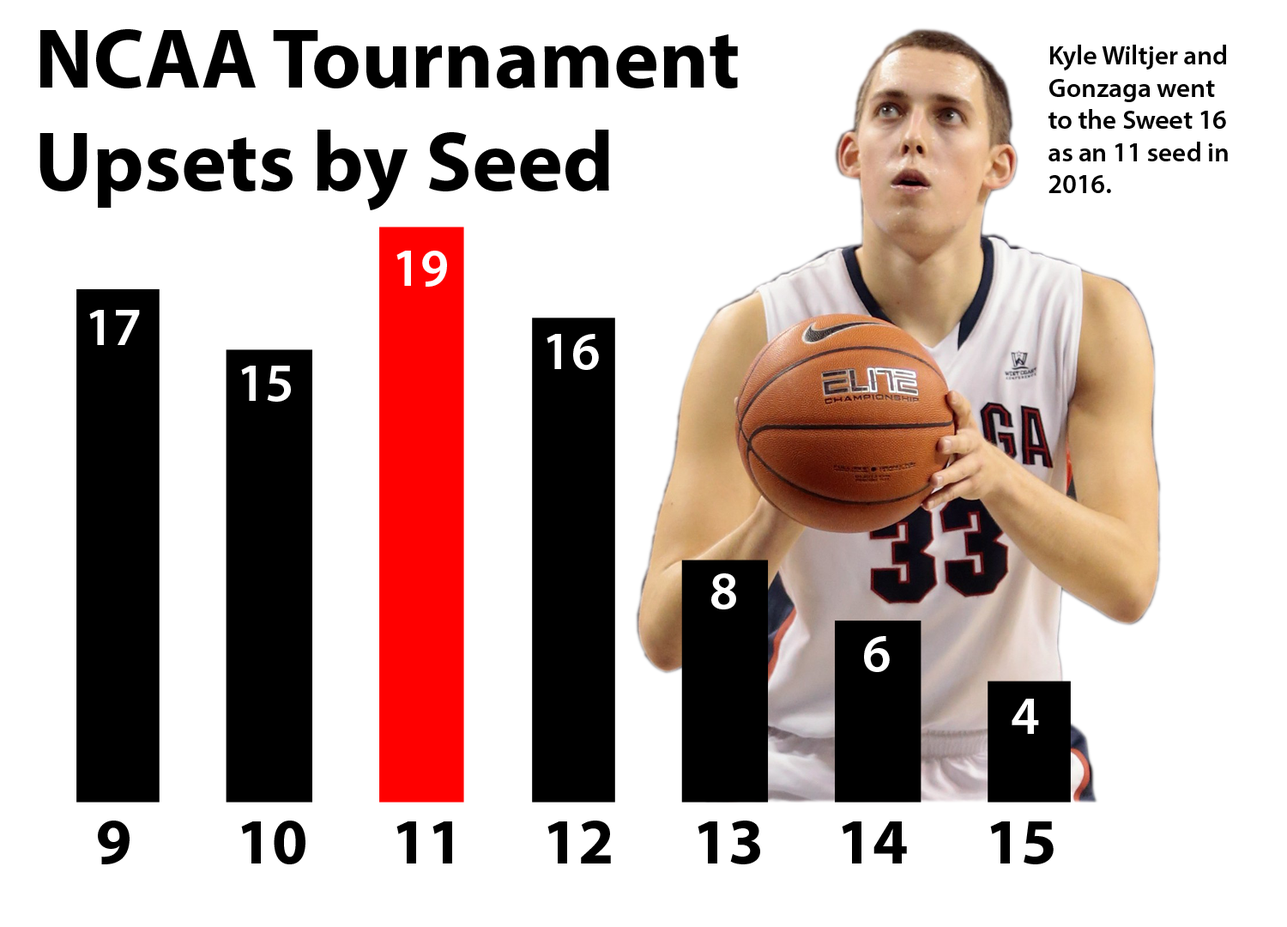
<style>
.page{position:relative;width:1287px;height:927px;background:#ffffff}
.page>*{position:absolute;margin:0}
.t1{font:85.8px "MyriadPro-Bold";color:#000000}
.t2{font:26.8px "MyriadPro-Semibold";color:#000000}
.t3{font:53.6px "MyriadPro-Semibold";color:#fefefe}
.t4{font:53.6px "MyriadPro-Semibold";color:#ffffff}
.t5{font:64.3px "MyriadPro-Bold";color:#000000}
</style>
<div class="page">
<p class="t1" style="left:39px;top:29px;width:699px;height:181px">NCAA Tournament<br>Upsets by Seed</p>
<p class="t2" style="left:1048px;top:45px;width:180px;height:148px">Kyle Wiltjer and Gonzaga went to the Sweet 16 as an 11 seed in 2016.</p>
<p class="t3" style="left:396px;top:251px;width:51px;height:36px">19</p>
<p class="t4" style="left:89px;top:310px;width:51px;height:35px">17</p>
<p class="t4" style="left:547px;top:334px;width:52px;height:36px">16</p>
<p class="t4" style="left:241px;top:365px;width:50px;height:37px">15</p>
<p class="t4" style="left:711px;top:573px;width:25px;height:36px">8</p>
<p class="t4" style="left:864px;top:636px;width:26px;height:36px">6</p>
<p class="t4" style="left:1012px;top:698px;width:27px;height:36px">4</p>
<p class="t5" style="left:98px;top:820px;width:32px;height:44px">9</p>
<p class="t5" style="left:241px;top:820px;width:64px;height:44px">10</p>
<p class="t5" style="left:396px;top:821px;width:56px;height:42px">11</p>
<p class="t5" style="left:547px;top:820px;width:64px;height:43px">12</p>
<p class="t5" style="left:698px;top:820px;width:62px;height:44px">13</p>
<p class="t5" style="left:842px;top:821px;width:65px;height:42px">14</p>
<p class="t5" style="left:990px;top:821px;width:64px;height:43px">15</p>
</div>
